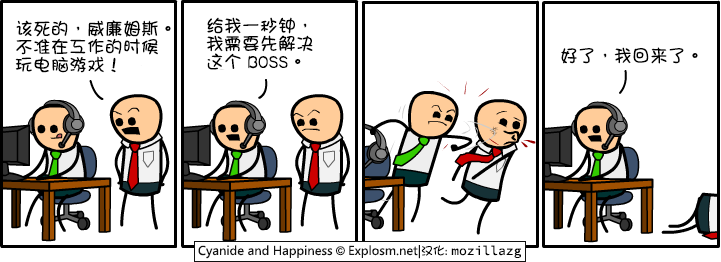
<style>
.page{position:relative;width:721px;height:262px;background:#ffffff}
.page>*{position:absolute;margin:0}
.t1{font:18px/18px "DFGirl";color:#000000}
.t2{font:18px "DFGirl";color:#000000}
</style>
<div class="page">
<p class="t1" style="left:206px;top:17px;width:107px;height:53px">给我一秒钟，<br>我需要先解决<br>这个 BOSS。</p>
<p class="t1" style="left:15px;top:20px;width:156px;height:53px">该死的，威廉姆斯。<br>不准在工作的时候<br>玩电脑游戏！</p>
<p class="t2" style="left:561px;top:47px;width:137px;height:17px">好了，我回来了。</p>
</div>
